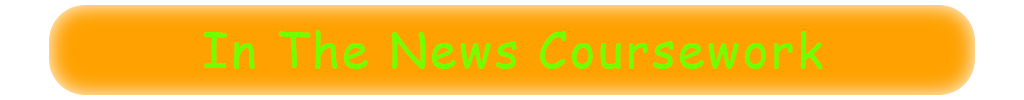
<style>
.page{position:relative;width:1024px;height:100px;background:#ffa100}
.page>*{position:absolute;margin:0}
.t1{font:48px "ComicSansMS";letter-spacing:0.06em;color:#72ff00}
</style>
<div class="page">
<p class="t1" style="left:203px;top:30px;width:620px;height:40px">In The News Coursework</p>
</div>
